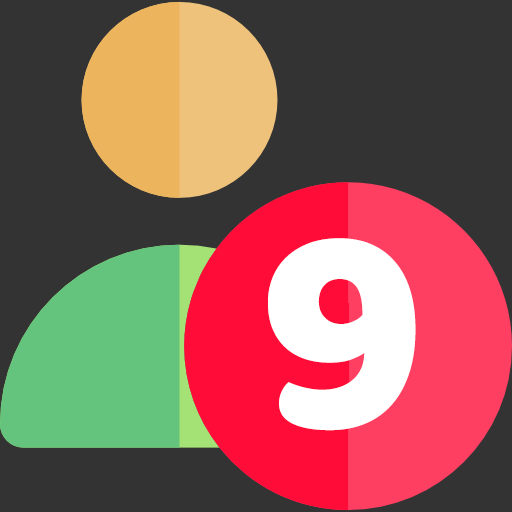
<style>
.page{position:relative;width:512px;height:512px;background:#333333}
.page>*{position:absolute;margin:0}
.t1{font:300px "BalooTamma-Regular";color:#ffffff}
</style>
<div class="page">
<p class="t1" style="left:268px;top:238px;width:148px;height:193px">9</p>
</div>
